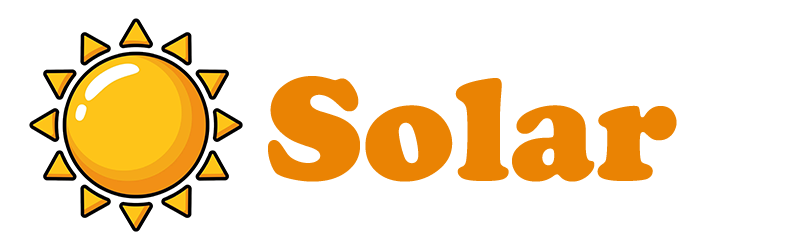
<style>
.page{position:relative;width:800px;height:250px;background:#ffffff}
.page>*{position:absolute;margin:0}
.t1{font:152px "CooperBlack";color:#ea8303}
</style>
<div class="page">
<p class="t1" style="left:268px;top:76px;width:409px;height:106px">Solar</p>
</div>
